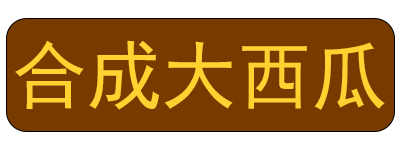
<style>
.page{position:relative;width:400px;height:150px;background:#773b00}
.page>*{position:absolute;margin:0}
.t1{font:75px "SimHei";color:#ffd131}
</style>
<div class="page">
<p class="t1" style="left:15px;top:40px;width:370px;height:70px">合成大西瓜</p>
</div>
